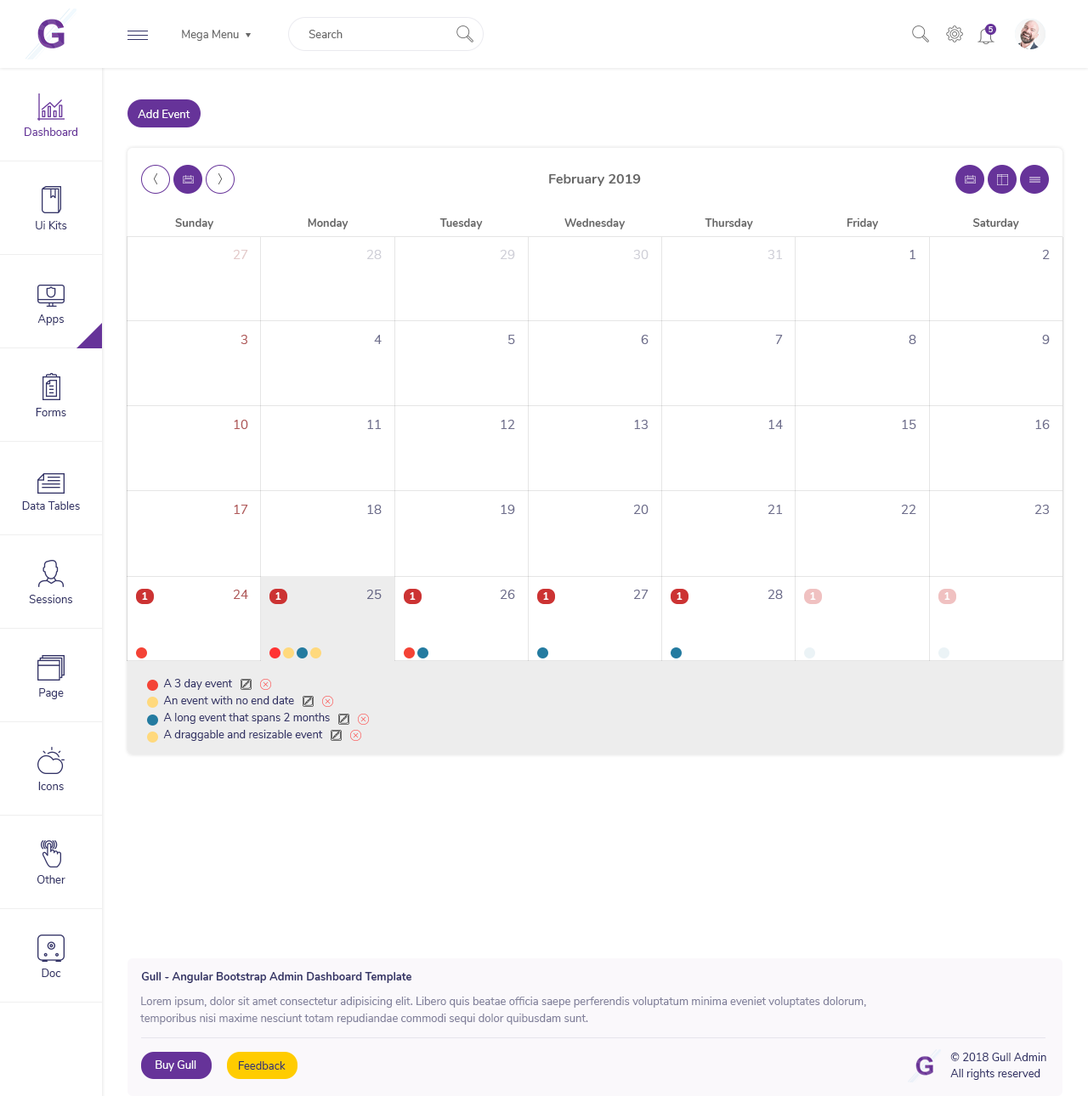
<style>
.page{position:relative;width:1088px;height:1096px;background:#ffffff}
.page>*{position:absolute;margin:0}
.t1{font:11px "Nunito-Regular";color:#666666}
.t2{font:7.6px "Nunito-SemiBold";color:#ffffff}
.t3{font:11px "Nunito-Regular";color:#ffffff}
.t4{font:11px "Nunito-Regular";color:#663399}
.t5{font:13.6px "Nunito-Bold";color:#666666}
.t6{font:11px "Nunito-Regular";color:#333366}
.t7{font:11px "Nunito-Bold";color:#666666}
.t8{font:12.7px "Nunito-Regular";color:#e3caca}
.t9{font:12.7px "Nunito-Regular";color:#d0d0d8}
.t10{font:12.7px "Nunito-Regular";color:#6e6e8c}
.t11{font:12.7px "Nunito-Regular";color:#b05858}
.t12{font:10.2px "Nunito-Bold";color:#ffffff}
.t13{font:12.7px "Nunito-Regular";color:#686887}
.t14{font:11px/17px "Nunito-Regular";color:#333366}
.t15{font:11px "Nunito-Bold";color:#333366}
.t16{font:11px/17px "Nunito-Regular";color:#82819b}
</style>
<div class="page">
<p class="t1" style="left:182px;top:30px;width:57px;height:11px">Mega Menu</p>
<p class="t1" style="left:308px;top:30px;width:34px;height:8px">Search</p>
<p class="t2" style="left:988px;top:26px;width:5px;height:6px">5</p>
<p class="t3" style="left:138px;top:110px;width:52px;height:8px">Add Event</p>
<p class="t4" style="left:25px;top:127px;width:52px;height:9px">Dashboard</p>
<p class="t5" style="left:549px;top:174px;width:92px;height:12px">February 2019</p>
<p class="t6" style="left:36px;top:221px;width:31px;height:8px">Ui Kits</p>
<p class="t7" style="left:175px;top:218px;width:38px;height:11px">Sunday</p>
<p class="t7" style="left:308px;top:218px;width:40px;height:11px">Monday</p>
<p class="t7" style="left:439px;top:218px;width:44px;height:11px">Tuesday</p>
<p class="t7" style="left:564px;top:218px;width:61px;height:11px">Wednesday</p>
<p class="t7" style="left:704px;top:218px;width:49px;height:11px">Thursday</p>
<p class="t7" style="left:846px;top:218px;width:32px;height:11px">Friday</p>
<p class="t7" style="left:973px;top:218px;width:46px;height:11px">Saturday</p>
<p class="t8" style="left:233px;top:250px;width:15px;height:9px">27</p>
<p class="t9" style="left:366px;top:250px;width:16px;height:9px">28</p>
<p class="t9" style="left:500px;top:250px;width:15px;height:9px">29</p>
<p class="t9" style="left:633px;top:250px;width:15px;height:9px">30</p>
<p class="t9" style="left:767px;top:250px;width:16px;height:9px">31</p>
<p class="t10" style="left:909px;top:250px;width:7px;height:9px">1</p>
<p class="t10" style="left:1042px;top:250px;width:8px;height:9px">2</p>
<p class="t6" style="left:37px;top:314px;width:27px;height:11px">Apps</p>
<p class="t11" style="left:240px;top:335px;width:7px;height:9px">3</p>
<p class="t10" style="left:374px;top:335px;width:8px;height:9px">4</p>
<p class="t10" style="left:508px;top:335px;width:7px;height:9px">5</p>
<p class="t10" style="left:641px;top:335px;width:7px;height:9px">6</p>
<p class="t10" style="left:775px;top:335px;width:8px;height:9px">7</p>
<p class="t10" style="left:908px;top:335px;width:8px;height:9px">8</p>
<p class="t10" style="left:1042px;top:335px;width:8px;height:9px">9</p>
<p class="t6" style="left:36px;top:408px;width:30px;height:8px">Forms</p>
<p class="t11" style="left:234px;top:420px;width:14px;height:9px">10</p>
<p class="t10" style="left:367px;top:420px;width:15px;height:9px">11</p>
<p class="t10" style="left:501px;top:420px;width:14px;height:9px">12</p>
<p class="t10" style="left:634px;top:420px;width:14px;height:9px">13</p>
<p class="t10" style="left:768px;top:420px;width:15px;height:9px">14</p>
<p class="t10" style="left:902px;top:420px;width:14px;height:9px">15</p>
<p class="t10" style="left:1035px;top:420px;width:15px;height:9px">16</p>
<p class="t6" style="left:22px;top:501px;width:58px;height:9px">Data Tables</p>
<p class="t11" style="left:234px;top:505px;width:14px;height:9px">17</p>
<p class="t10" style="left:367px;top:505px;width:15px;height:9px">18</p>
<p class="t10" style="left:501px;top:505px;width:14px;height:9px">19</p>
<p class="t10" style="left:633px;top:505px;width:15px;height:9px">20</p>
<p class="t10" style="left:767px;top:505px;width:16px;height:9px">21</p>
<p class="t10" style="left:901px;top:505px;width:15px;height:9px">22</p>
<p class="t10" style="left:1034px;top:505px;width:15px;height:9px">23</p>
<p class="t12" style="left:142px;top:592px;width:6px;height:8px">1</p>
<p class="t11" style="left:233px;top:590px;width:15px;height:9px">24</p>
<p class="t12" style="left:275px;top:592px;width:6px;height:8px">1</p>
<p class="t13" style="left:366px;top:590px;width:16px;height:9px">25</p>
<p class="t12" style="left:410px;top:592px;width:6px;height:8px">1</p>
<p class="t10" style="left:500px;top:590px;width:15px;height:9px">26</p>
<p class="t12" style="left:543px;top:592px;width:6px;height:8px">1</p>
<p class="t10" style="left:633px;top:590px;width:15px;height:9px">27</p>
<p class="t12" style="left:676px;top:592px;width:6px;height:8px">1</p>
<p class="t10" style="left:767px;top:590px;width:16px;height:9px">28</p>
<p class="t12" style="left:810px;top:592px;width:6px;height:8px">1</p>
<p class="t12" style="left:944px;top:592px;width:6px;height:8px">1</p>
<p class="t6" style="left:29px;top:595px;width:43px;height:8px">Sessions</p>
<p class="t6" style="left:39px;top:688px;width:25px;height:11px">Page</p>
<p class="t14" style="left:163px;top:679px;width:167px;height:62px">A 3 day event <br> An event with no end date <br> A long event that spans 2 months <br> A draggable and resizable event</p>
<p class="t6" style="left:38px;top:782px;width:26px;height:8px">Icons</p>
<p class="t6" style="left:37px;top:875px;width:28px;height:9px">Other</p>
<p class="t6" style="left:42px;top:969px;width:19px;height:8px">Doc</p>
<p class="t15" style="left:141px;top:972px;width:270px;height:11px">Gull - Angular Bootstrap Admin Dashboard Template</p>
<p class="t16" style="left:140px;top:997px;width:726px;height:28px">Lorem ipsum, dolor sit amet consectetur adipisicing elit. Libero quis beatae officia saepe perferendis voluptatum minima eveniet voluptates dolorum, <br>temporibus nisi maxime nesciunt totam repudiandae commodi sequi dolor quibusdam sunt.</p>
<p class="t3" style="left:156px;top:1061px;width:40px;height:11px">Buy Gull</p>
<p class="t6" style="left:239px;top:1061px;width:47px;height:9px">Feedback</p>
<p class="t6" style="left:950px;top:1053px;width:96px;height:8px">© 2018 Gull Admin</p>
<p class="t6" style="left:950px;top:1069px;width:90px;height:11px">All rights reserved</p>
</div>
